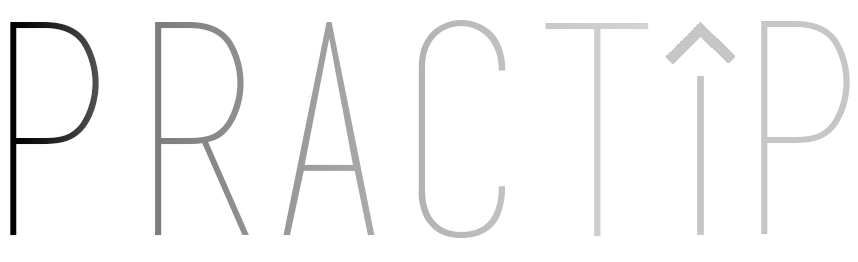
<style>
.page{position:relative;width:858px;height:262px;background:#ffffff}
.page>*{position:absolute;margin:0}
.t1{font:293px "basictitlefont"}
.t2{font:293px "basictitlefont";color:#c6c6c6}
</style>
<div class="page">
<p class="t1" style="left:10px;top:20px;width:639px;height:218px">Pract</p>
<p class="t2" style="left:761px;top:21px;width:89px;height:214px">p</p>
</div>
